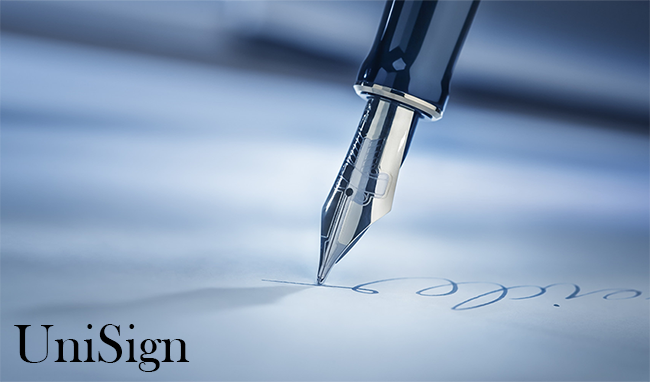
<style>
.page{position:relative;width:650px;height:382px}
.page>*{position:absolute;margin:0}
.t1{font:55px "BaskOldFace";color:#000000}
</style>
<div class="page">
<p class="t1" style="left:14px;top:324px;width:176px;height:48px">UniSign</p>
</div>
